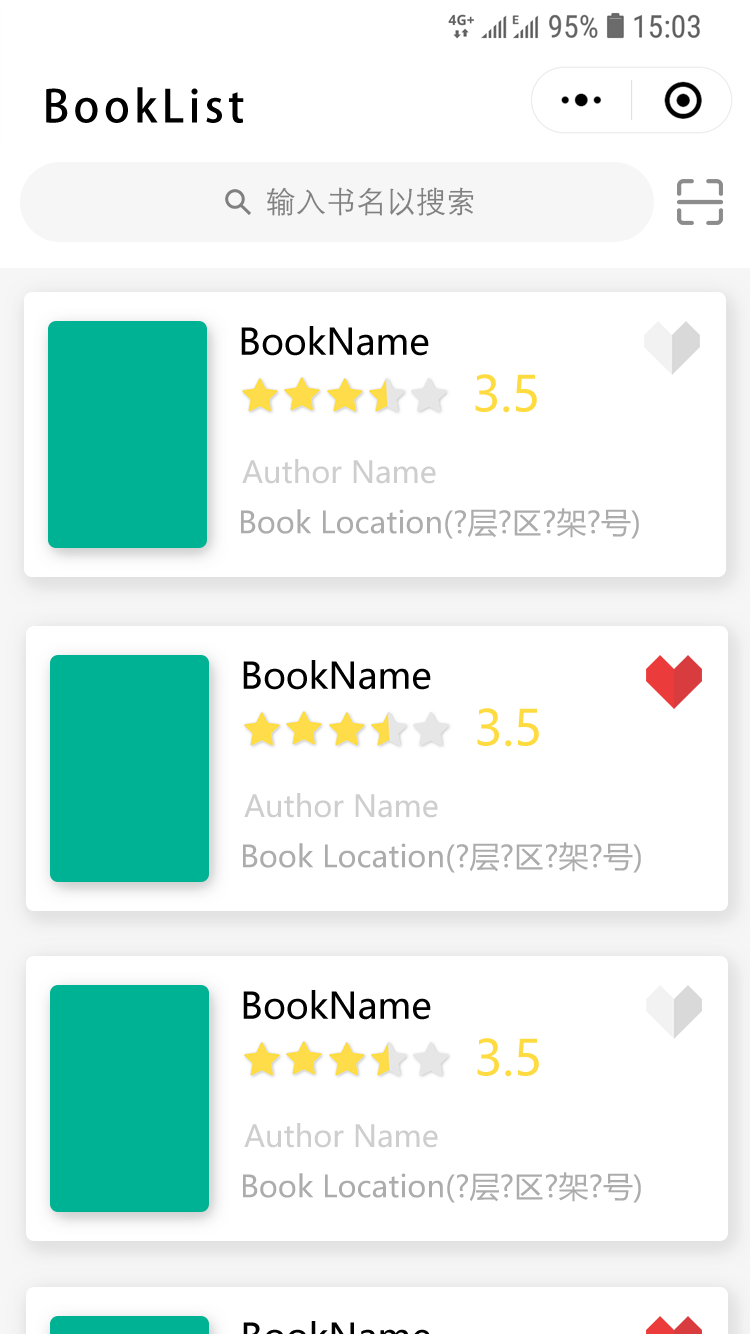
<style>
.page{position:relative;width:750px;height:1334px;background:#ffffff}
.page>*{position:absolute;margin:0}
.t1{font:44px "AdobeHeitiStd-Regular";letter-spacing:0.1em;color:#000000}
.t2{font:30px "DengXian-Regular";color:#808080}
.t3{font:36px "MicrosoftYaHeiUI";color:#000000}
.t4{font:48.6px "MicrosoftYaHeiUI";color:#ffdb42}
.t5{font:30.1px "MicrosoftYaHeiUI";color:#cecece}
.t6{font:30.1px "MicrosoftYaHeiUI";color:#acacac}
</style>
<div class="page">
<p class="t1" style="left:46px;top:87px;width:198px;height:36px">BookList</p>
<p class="t2" style="left:267px;top:187px;width:207px;height:29px">输入书名以搜索</p>
<p class="t3" style="left:241px;top:326px;width:188px;height:30px">BookName</p>
<p class="t4" style="left:475px;top:374px;width:62px;height:39px">3.5</p>
<p class="t5" style="left:242px;top:459px;width:194px;height:25px">Author Name</p>
<p class="t6" style="left:241px;top:508px;width:398px;height:31px">Book Location(?层?区?架?号)</p>
<p class="t3" style="left:243px;top:660px;width:188px;height:30px">BookName</p>
<p class="t4" style="left:477px;top:708px;width:62px;height:39px">3.5</p>
<p class="t5" style="left:244px;top:793px;width:194px;height:25px">Author Name</p>
<p class="t6" style="left:243px;top:842px;width:398px;height:31px">Book Location(?层?区?架?号)</p>
<p class="t3" style="left:243px;top:990px;width:188px;height:30px">BookName</p>
<p class="t4" style="left:477px;top:1038px;width:62px;height:39px">3.5</p>
<p class="t5" style="left:244px;top:1123px;width:194px;height:25px">Author Name</p>
<p class="t6" style="left:243px;top:1172px;width:398px;height:31px">Book Location(?层?区?架?号)</p>
</div>
